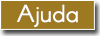
<style>
.page{position:relative;width:100px;height:36px;background:#9d7922}
.page>*{position:absolute;margin:0}
.t1{font:24px "Arcon-Regular";color:#ffffff}
</style>
<div class="page">
<p class="t1" style="left:17px;top:4px;width:61px;height:23px">Ajuda</p>
</div>
